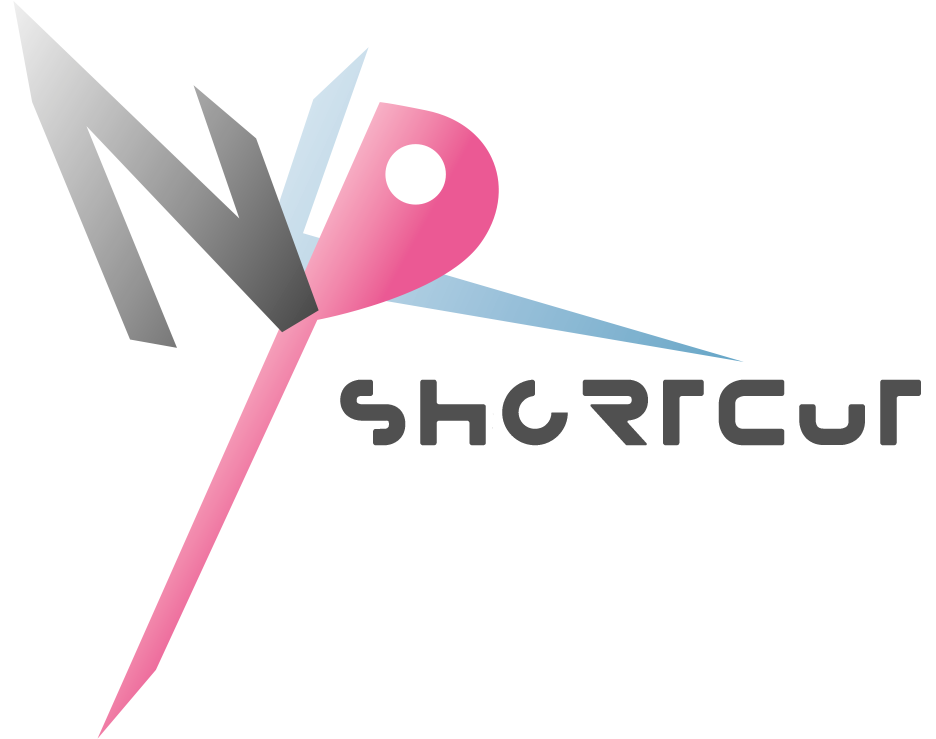
<style>
.page{position:relative;width:936px;height:739px;background:#ffffff}
.page>*{position:absolute;margin:0}
.t1{font:75px "IchijiOne";color:#505050}
</style>
<div class="page">
<p class="t1" style="left:340px;top:379px;width:581px;height:67px">shortcut</p>
</div>
